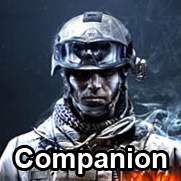
<style>
.page{position:relative;width:181px;height:181px}
.page>*{position:absolute;margin:0}
.t1{font:28px "Arial-BoldMT";color:#ffffff}
</style>
<div class="page">
<p class="t1" style="left:15px;top:148px;width:152px;height:26px">Companion</p>
</div>
